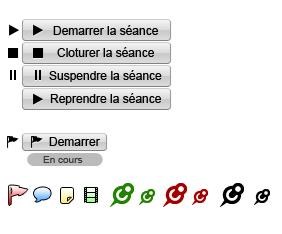
<style>
.page{position:relative;width:282px;height:234px;background:#ffffff}
.page>*{position:absolute;margin:0}
.t1{font:12px "ArialMT";color:#000000}
.t2{font:10px "ArialMT";color:#373737}
</style>
<div class="page">
<p class="t1" style="left:53px;top:25px;width:105px;height:10px">Demarrer la séance</p>
<p class="t1" style="left:57px;top:47px;width:97px;height:10px">Cloturer la séance</p>
<p class="t1" style="left:49px;top:70px;width:113px;height:12px">Suspendre la séance</p>
<p class="t1" style="left:50px;top:93px;width:111px;height:12px">Reprendre la séance</p>
<p class="t1" style="left:49px;top:137px;width:51px;height:9px">Demarrer</p>
<p class="t2" style="left:43px;top:156px;width:40px;height:7px">En cours</p>
</div>
